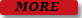
<style>
.page{position:relative;width:82px;height:18px;background:#c9131d}
.page>*{position:absolute;margin:0}
.t1{font:12px "Georgia-BoldItalic";letter-spacing:0.075em;color:#000000}
</style>
<div class="page">
<p class="t1" style="left:14px;top:2px;width:45px;height:9px">MORE</p>
</div>
